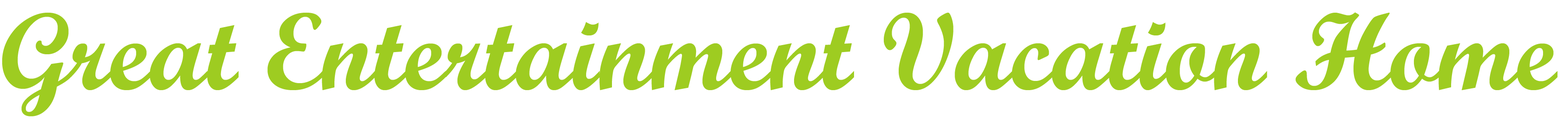
<style>
.page{position:relative;width:1568px;height:126px;background:#ffffff}
.page>*{position:absolute;margin:0}
.t1{font:109.4px "ScriptMTBold";color:#9ecc21}
</style>
<div class="page">
<p class="t1" style="left:2px;top:12px;width:1555px;height:104px">Great Entertainment Vacation Home</p>
</div>
